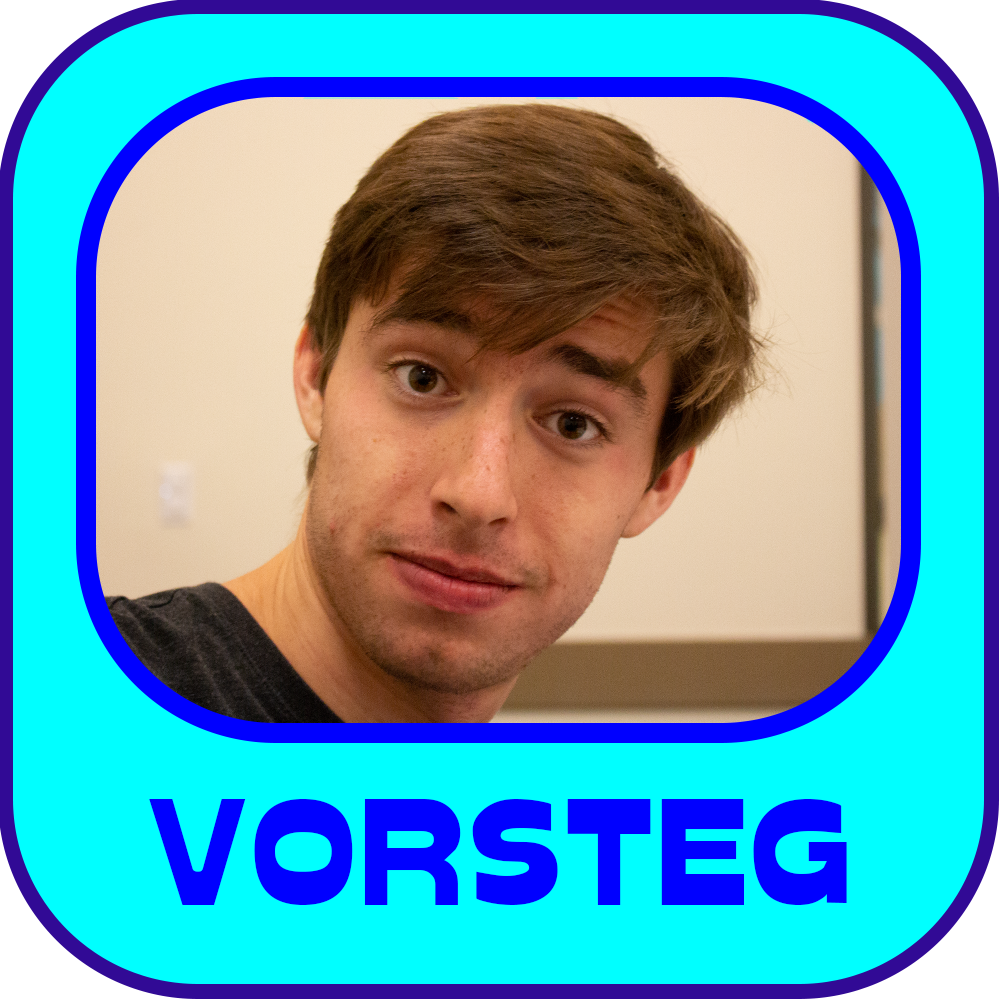
<style>
.page{position:relative;width:1000px;height:1000px;background:#00ffff}
.page>*{position:absolute;margin:0}
.t1{font:145.8px "Glockenspiel";color:#0000ff}
</style>
<div class="page">
<p class="t1" style="left:149px;top:799px;width:698px;height:106px">VORSTEG</p>
</div>
